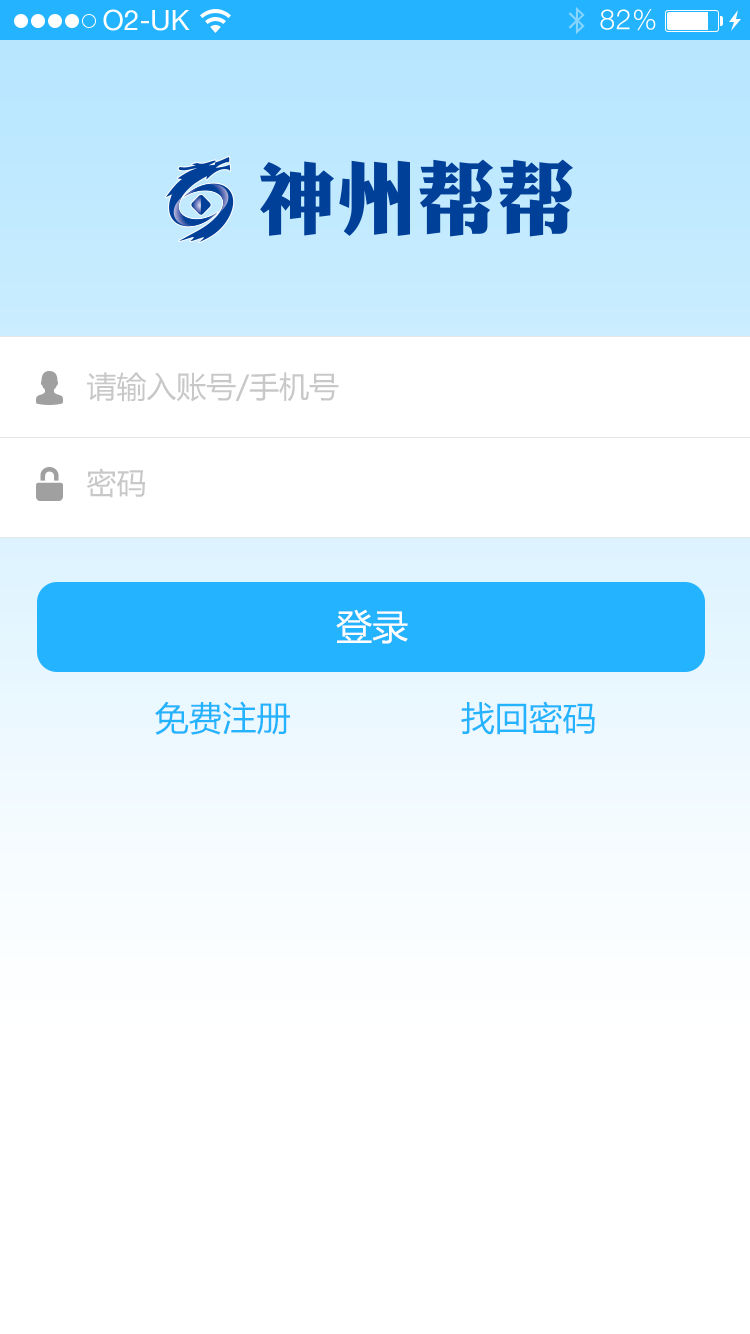
<style>
.page{position:relative;width:750px;height:1334px;background:#ffffff}
.page>*{position:absolute;margin:0}
.t1{font:30px "MicrosoftYaHei";color:#c8c8c8}
.t2{font:36px "MicrosoftYaHei";color:#ffffff}
.t3{font:34px "MicrosoftYaHei";color:#24b3ff}
</style>
<div class="page">
<p class="t1" style="left:87px;top:372px;width:252px;height:30px">请输入账号/手机号</p>
<p class="t1" style="left:86px;top:468px;width:59px;height:30px">密码</p>
<p class="t2" style="left:336px;top:609px;width:72px;height:35px">登录</p>
<p class="t3" style="left:155px;top:701px;width:440px;height:34px">免费注册                 找回密码</p>
</div>
